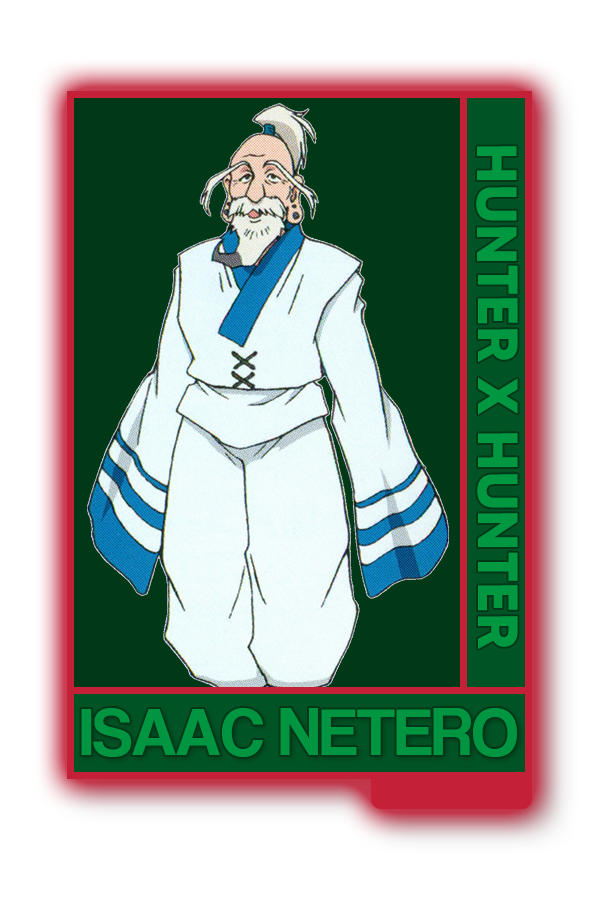
<style>
.page{position:relative;width:600px;height:900px;background:#ffffff}
.page>*{position:absolute;margin:0}
.t1{font:56.5px "MADETOMMY-Bold";color:#009741}
.t2{font:68.9px "CoolveticaRg-Regular";color:#009641}
</style>
<div class="page">
<p class="t1" style="left:476px;top:146px;width:42px;height:503px;rotate:90deg">HUNTER X HUNTER</p>
<p class="t2" style="left:81px;top:708px;width:436px;height:49px">ISAAC NETERO</p>
</div>
